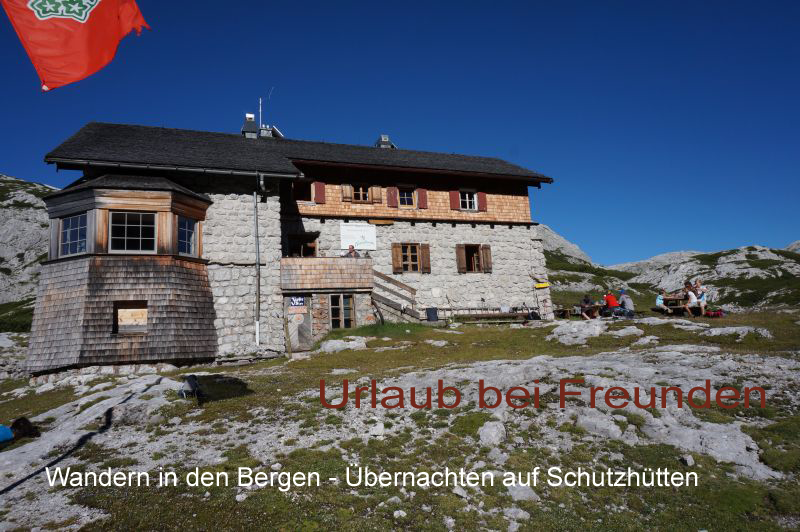
<style>
.page{position:relative;width:800px;height:532px}
.page>*{position:absolute;margin:0}
.t1{font:39.7px "ArialMT";color:#722619;scale:1.25 1}
.t2{font:26.2px "ArialMT";color:#fffffb}
</style>
<div class="page">
<p class="t1" style="left:320px;top:379px;width:446px;height:30px">Urlaub bei Freunden</p>
<p class="t2" style="left:45px;top:463px;width:653px;height:29px">Wandern in den Bergen - Übernachten auf Schutzhütten</p>
</div>
